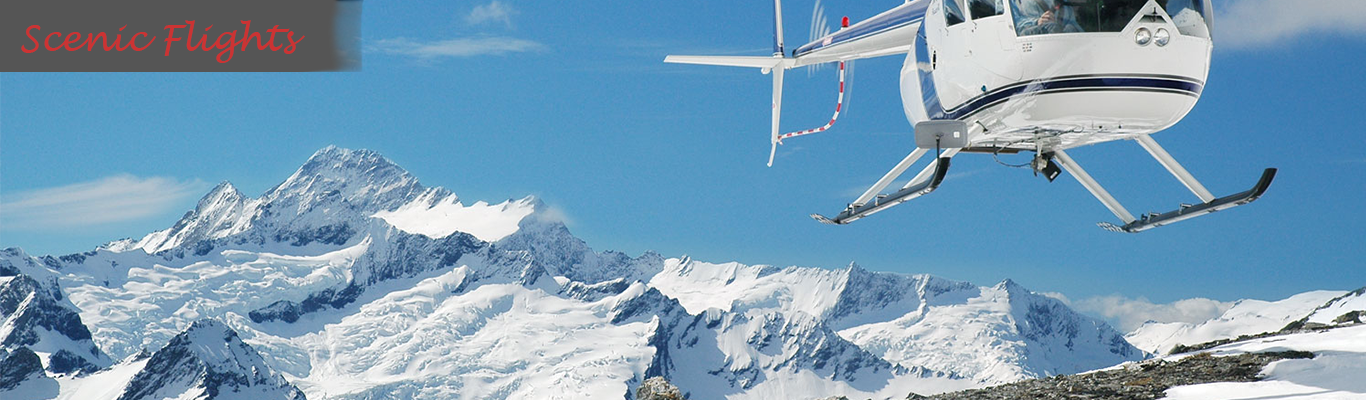
<style>
.page{position:relative;width:1366px;height:400px}
.page>*{position:absolute;margin:0}
.t1{font:36px "LucidaHandwriting-Italic";color:#cc3333}
</style>
<div class="page">
<p class="t1" style="left:21px;top:20px;width:284px;height:43px">Scenic Flights</p>
</div>
